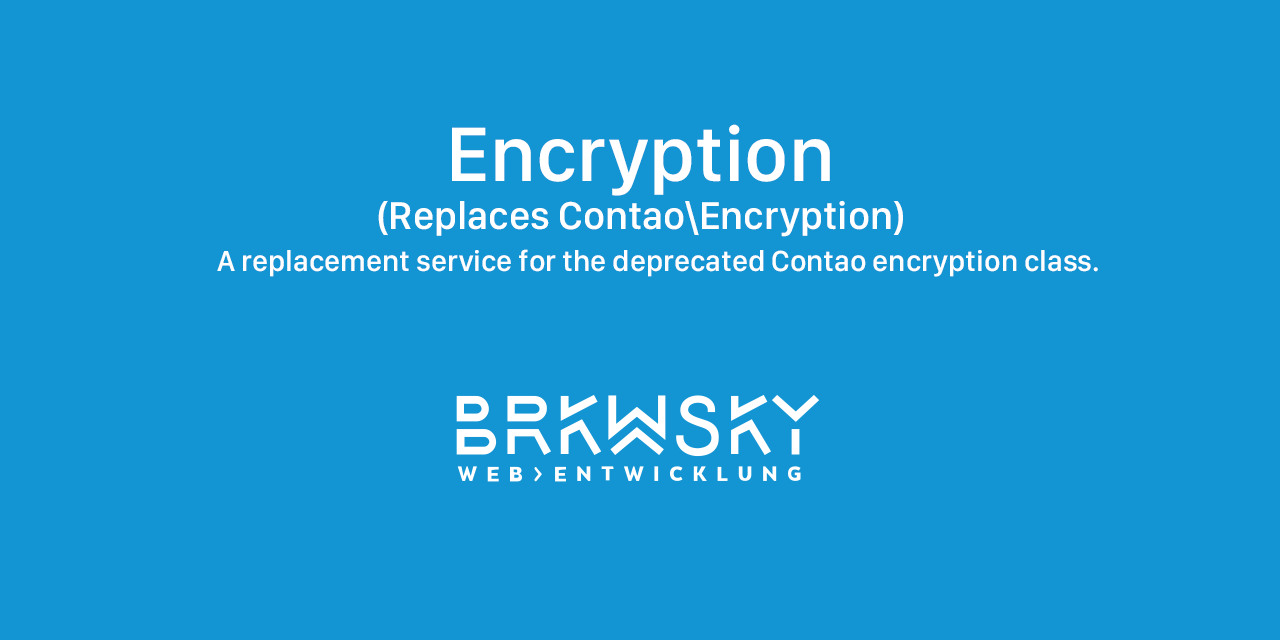
<style>
.page{position:relative;width:1280px;height:640px;background:#1394d3}
.page>*{position:absolute;margin:0}
.t1{font:40px "SFCompactDisplay-Medium";color:#ffffff}
.t2{font:80px "SFCompactDisplay-Medium";color:#ffffff}
.t3{font:30px "SFCompactDisplay-Medium";color:#ffffff}
</style>
<div class="page">
<p class="t1" style="left:378px;top:124px;width:525px;height:113px;text-align:center"><span class="t2">Encryption<br></span>(Replaces Contao\Encryption)</p>
<p class="t3" style="left:217px;top:249px;width:881px;height:28px">A replacement service for the deprecated Contao encryption class.</p>
</div>
